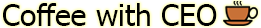
<style>
.page{position:relative;width:261px;height:28px}
.page>*{position:absolute;margin:0}
.t1{font:30px "Tahoma";color:#000000}
</style>
<div class="page">
<p class="t1" style="left:3px;top:3px;width:214px;height:23px">Coffee with CEO</p>
</div>
